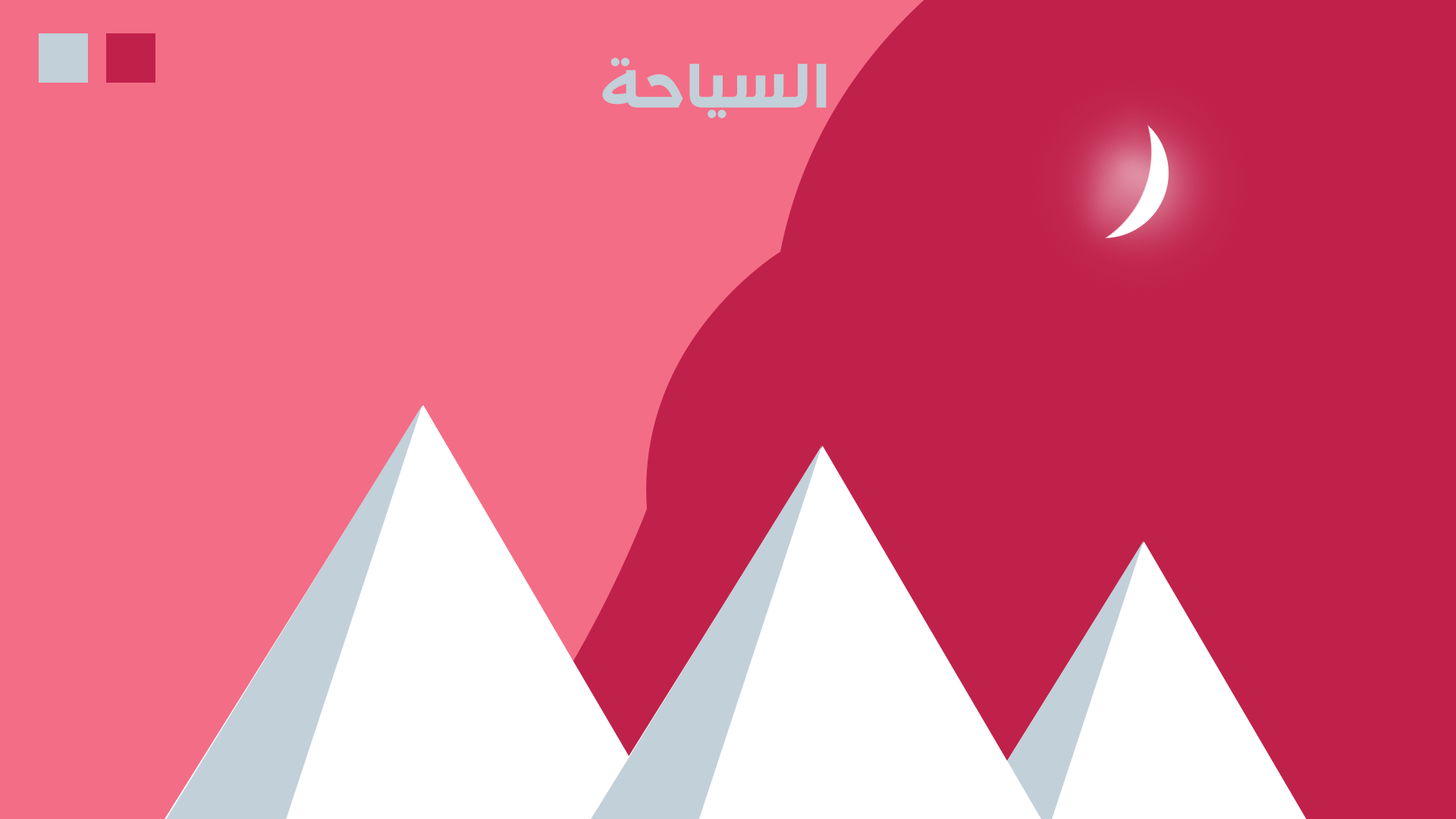
<style>
.page{position:relative;width:1456px;height:819px;background:#f36d86}
.page>*{position:absolute;margin:0}
.t1{font:58.7px "BCArabic-Black";color:#c2d0d9}
</style>
<div class="page">
<p class="t1" style="left:602px;top:58px;width:225px;height:60px">السياحة</p>
</div>
